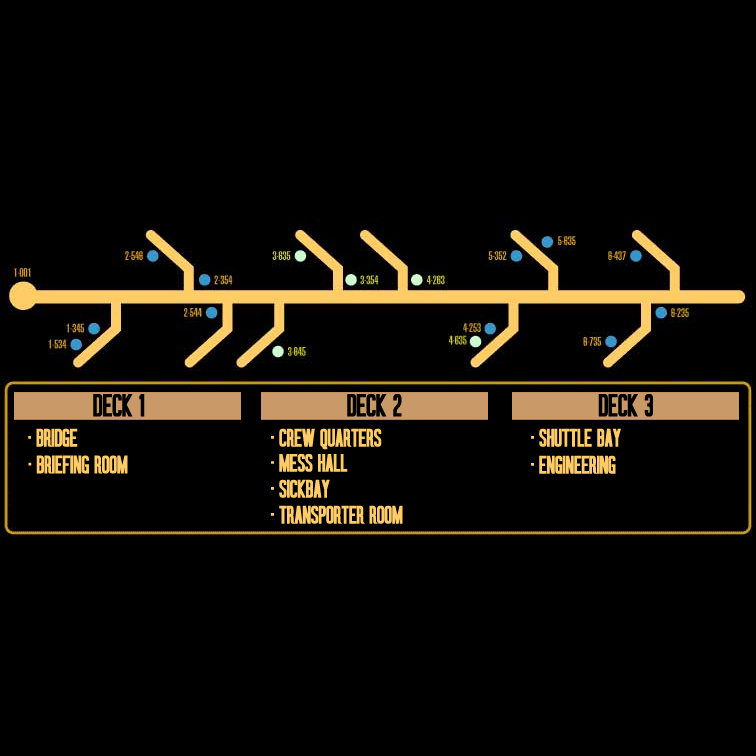
<style>
.page{position:relative;width:756px;height:756px;background:#000000}
.page>*{position:absolute;margin:0}
.t1{font:33px "Okuda-Bold";color:#000000}
.t2{font:25.9px "Okuda-Bold";color:#ffcc67}
</style>
<div class="page">
<p class="t1" style="left:93px;top:394px;width:52px;height:23px">DECK 1</p>
<p class="t1" style="left:347px;top:394px;width:55px;height:23px">DECK 2</p>
<p class="t1" style="left:598px;top:394px;width:55px;height:23px">DECK 3</p>
<p class="t2" style="left:28px;top:428px;width:50px;height:19px">∙ BRIDGE</p>
<p class="t2" style="left:271px;top:428px;width:111px;height:22px">∙ CREW QUARTERS</p>
<p class="t2" style="left:531px;top:428px;width:90px;height:19px">∙ SHUTTLE BAY</p>
<p class="t2" style="left:28px;top:455px;width:100px;height:19px">∙ BRIEFING ROOM</p>
<p class="t2" style="left:271px;top:454px;width:77px;height:18px">∙ MESS HALL</p>
<p class="t2" style="left:531px;top:455px;width:85px;height:19px">∙ ENGINEERING</p>
<p class="t2" style="left:271px;top:479px;width:59px;height:19px">∙ SICKBAY</p>
<p class="t2" style="left:271px;top:505px;width:132px;height:19px">∙ TRANSPORTER ROOM</p>
</div>
